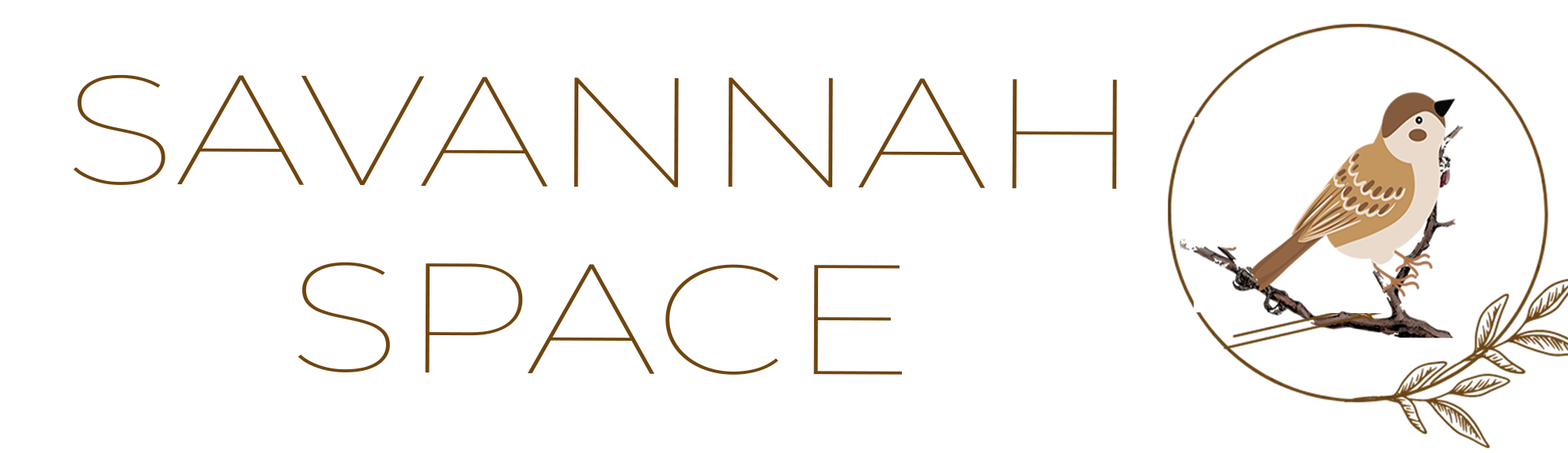
<style>
.page{position:relative;width:1568px;height:453px;background:#ffffff}
.page>*{position:absolute;margin:0}
.t1{font:155.8px "Montserrat-Thin";color:#70450f;scale:1.21 1}
</style>
<div class="page">
<p class="t1" style="left:73px;top:74px;width:1044px;height:301px;text-align:center">SAVANNAH<br>SPACE</p>
</div>
